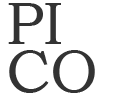
<style>
.page{position:relative;width:128px;height:96px;background:#ffffff}
.page>*{position:absolute;margin:0}
.t1{font:60px/48px "BookmanOldStyle";color:#333333}
</style>
<div class="page">
<p class="t1" style="left:8px;top:3px;width:87px;height:90px">PI<br>CO</p>
</div>
